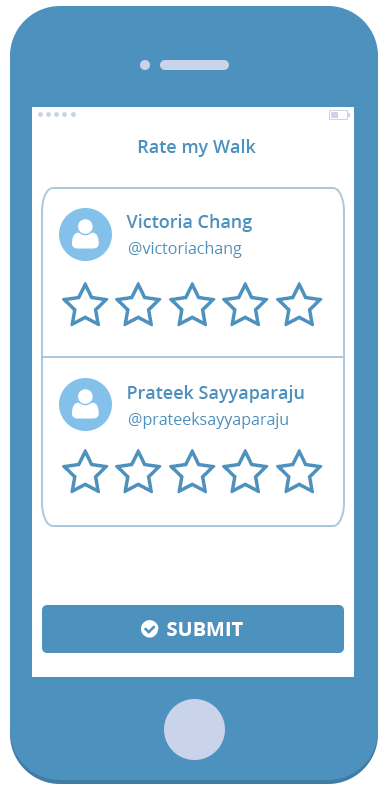
<style>
.page{position:relative;width:387px;height:792px;background:#ffffff}
.page>*{position:absolute;margin:0}
.t1{font:18px "OpenSans-Semibold";color:#4d91bf}
.t2{font:16px "OpenSans";color:#4d91bf}
</style>
<div class="page">
<p class="t1" style="left:138px;top:139px;width:118px;height:18px">Rate my Walk</p>
<p class="t1" style="left:126px;top:214px;width:126px;height:18px">Victoria Chang</p>
<p class="t2" style="left:128px;top:241px;width:114px;height:17px">@victoriachang</p>
<p class="t1" style="left:128px;top:385px;width:176px;height:18px">Prateek Sayyaparaju</p>
<p class="t2" style="left:128px;top:412px;width:160px;height:17px">@prateeksayyaparaju</p>
</div>
